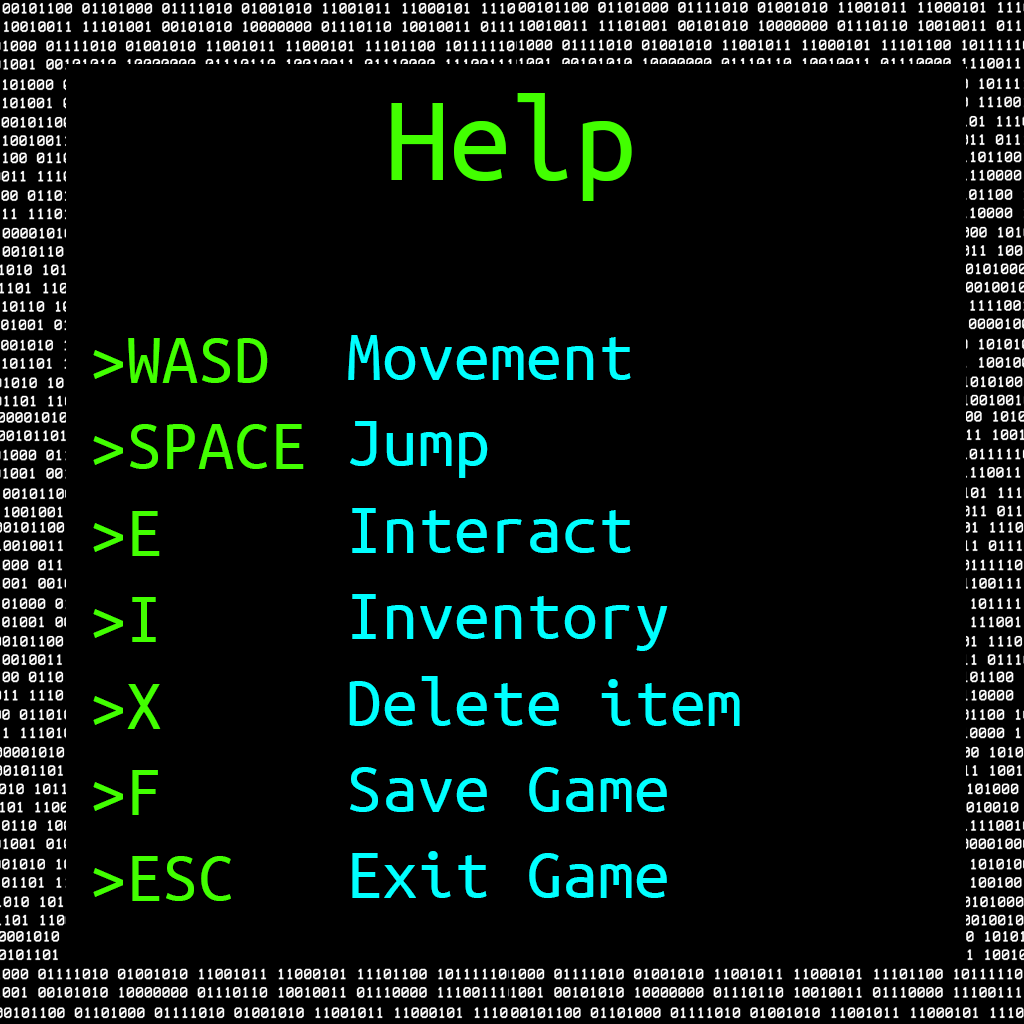
<style>
.page{position:relative;width:1024px;height:1024px;background:#000000}
.page>*{position:absolute;margin:0}
.t1{font:125px "UbuntuMono-Regular";color:#42ff00}
.t2{font:72px "UbuntuMono-Regular";color:#42ff00}
.t3{font:72px "UbuntuMono-Regular";color:#00ffff}
</style>
<div class="page">
<p class="t1" style="left:391px;top:93px;width:241px;height:108px">Help</p>
<p class="t2" style="left:93px;top:338px;width:211px;height:563px">&gt;WASD<br>&gt;SPACE<br>&gt;E<br>&gt;I<br>&gt;X<br>&gt;F<br>&gt;ESC</p>
<p class="t3" style="left:348px;top:335px;width:392px;height:563px">Movement<br>Jump<br>Interact<br>Inventory<br>Delete item<br>Save Game<br>Exit Game</p>
</div>
